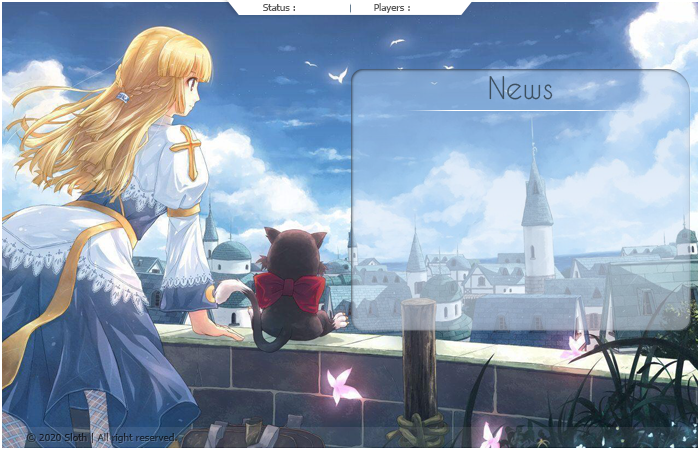
<style>
.page{position:relative;width:700px;height:450px}
.page>*{position:absolute;margin:0}
.t1{font:9.7px "Tahoma";color:#595959}
.t2{font:29.2px "CaviarDreams";color:#3c4f5f}
.t3{font:10px "Tahoma";letter-spacing:0.01em;color:#1a2738}
</style>
<div class="page">
<p class="t1" style="left:263px;top:4px;width:32px;height:7px">Status :</p>
<p class="t1" style="left:374px;top:3px;width:36px;height:10px">Players :</p>
<p class="t2" style="left:489px;top:76px;width:64px;height:24px">News</p>
<p class="t3" style="left:26px;top:433px;width:151px;height:10px">© 2020 Sloth | All right reserved.</p>
</div>
